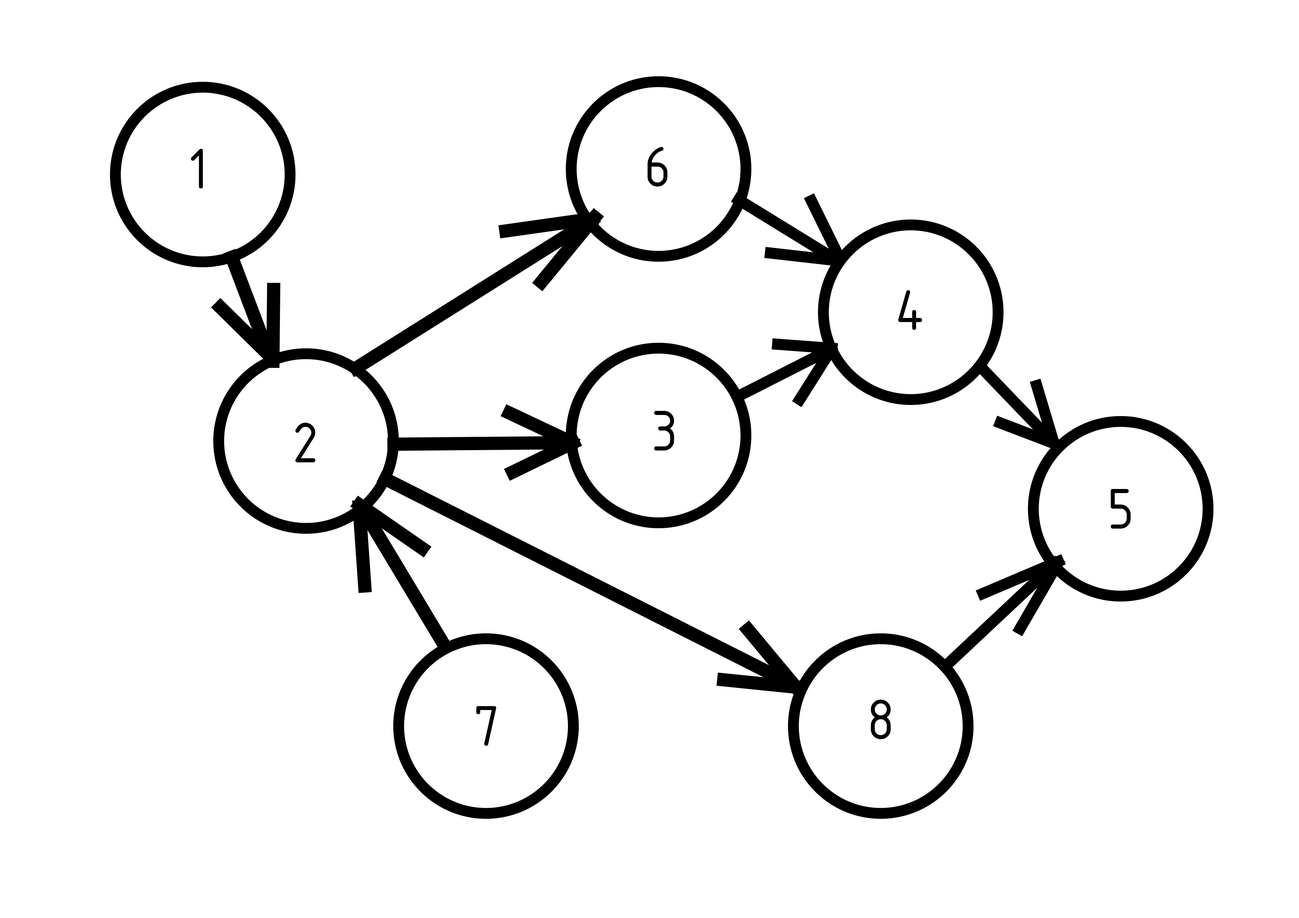
<style>
.page{position:relative;width:1299px;height:918px;background:#ffffff}
.page>*{position:absolute;margin:0}
.t1{font:55.5px "GOST-Common";color:#000000}
</style>
<div class="page">
<p class="t1" style="left:191px;top:149px;width:12px;height:39px">1</p>
<p class="t1" style="left:647px;top:147px;width:21px;height:40px">6</p>
<p class="t1" style="left:898px;top:290px;width:24px;height:40px">4</p>
<p class="t1" style="left:654px;top:411px;width:20px;height:40px">3</p>
<p class="t1" style="left:295px;top:423px;width:20px;height:39px">2</p>
<p class="t1" style="left:1110px;top:489px;width:21px;height:40px">5</p>
<p class="t1" style="left:870px;top:700px;width:21px;height:39px">8</p>
<p class="t1" style="left:476px;top:706px;width:20px;height:40px">7</p>
</div>
